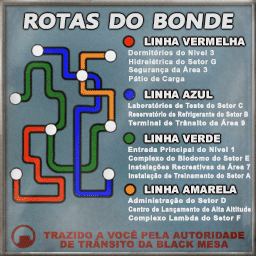
<style>
.page{position:relative;width:256px;height:256px}
.page>*{position:absolute;margin:0}
.t1{font:29.3px "Gadugi-Bold";letter-spacing:-0.02em;color:#e2e2e2;font-variant:small-caps;font-weight:bold;scale:1.13 1}
.t2{font:13.6px "Arial-Black";letter-spacing:-0.03em;color:#eaeaea;font-variant:small-caps;scale:0.9 1}
.t3{font:6.7px/8.7px "Arial-BoldMT";letter-spacing:0.05em;color:#eaeaea;font-weight:bold;scale:1.04 1}
.t4{font:6.7px/8.7px "Arial-BoldMT";letter-spacing:0.05em;color:#eaeaea;font-weight:bold;scale:0.81 1}
.t5{font:6.7px/8.7px "Arial-BoldMT";letter-spacing:0.05em;color:#eaeaea;font-weight:bold;scale:0.95 1}
.t6{font:6.7px/8.7px "Arial-BoldMT";letter-spacing:0.05em;color:#eaeaea;font-weight:bold}
.t7{font:6.7px/8.7px "Arial-BoldMT";letter-spacing:0.05em;color:#eaeaea;font-weight:bold;scale:0.88 1}
.t8{font:6.7px/8.7px "Arial-BoldMT";letter-spacing:0.05em;color:#eaeaea;font-weight:bold;scale:0.86 1}
.t9{font:6.7px/7px "Arial-BoldMT";letter-spacing:0.05em;color:#eaeaea;font-weight:bold;scale:0.86 1}
.t10{font:9.6px/9px "Arial-Black";letter-spacing:0.02em;text-transform:uppercase}
</style>
<div class="page">
<p class="t1" style="left:23px;top:13px;width:211px;height:16px">rotas do bonde</p>
<p class="t2" style="left:144px;top:37px;width:101px;height:9px">linha vermelha</p>
<p class="t3" style="left:128px;top:50px;width:88px;height:33px">Dormitórios do Nível 3<br>Hidrelétrica do Setor G<br>Segurança da Área 3<br>Pátio de Carga</p>
<p class="t4" style="left:128px;top:102px;width:120px;height:24px"><span class="t5">Laboratórios de Teste do Setor C<br></span>Reservatório de Refrigerante do Setor B<br><span class="t3">Terminal de Trânsito da Área 9</span></p>
<p class="t2" style="left:144px;top:90px;width:69px;height:9px">linha azul</p>
<p class="t2" style="left:144px;top:134px;width:76px;height:9px">linha verde</p>
<p class="t6" style="left:128px;top:146px;width:123px;height:34px"><span class="t3">Entrada Principal do Nível 1<br></span>Complexo do Biodomo do Setor E<br>Instalações Recreativas da Área 7<br><span class="t7">Instalação de Treinamento do Setor A</span></p>
<p class="t2" style="left:144px;top:185px;width:93px;height:9px">linha amarela</p>
<p class="t3" style="left:127px;top:197px;width:124px;height:25px">Administração do Setor D<br><span class="t8">Centro de Lançamento </span><span class="t9">de Alta Altitude<br></span>Complexo Lambda do Setor F</p>
<p class="t10" style="left:43px;top:230px;width:202px;height:18px;text-align:center">Trazido a você pela autoridade<br>de trânsito da black mesa</p>
</div>
